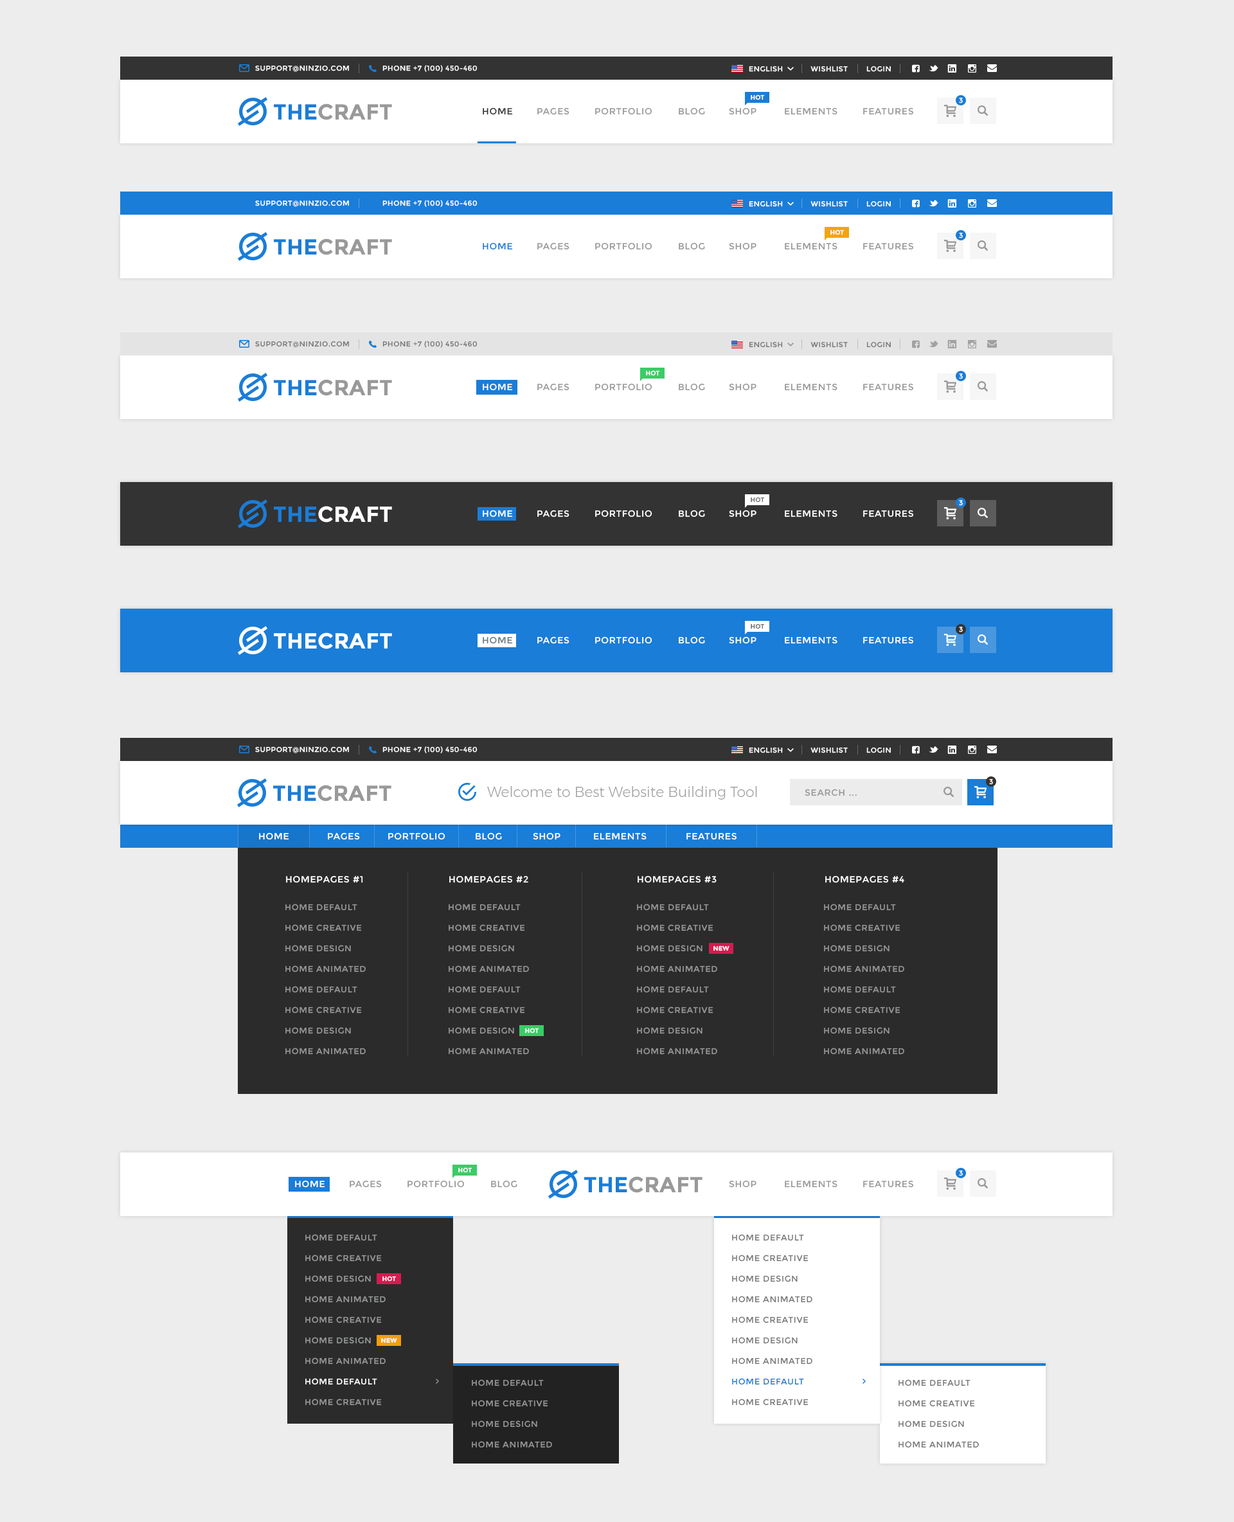
<style>
.page{position:relative;width:1234px;height:1522px;background:#ededed}
.page>*{position:absolute;margin:0}
.t1{font:7.1px "Montserrat-Regular";letter-spacing:0.05em;color:#ffffff;text-transform:uppercase}
.t2{font:6.4px "Montserrat-Bold";color:#ffffff;text-transform:uppercase}
.t3{font:21.9px "Montserrat-Bold";color:#999999;text-transform:uppercase}
.t4{font:21.9px "Montserrat-Bold";color:#1a7dd7;text-transform:uppercase}
.t5{font:9px "Montserrat-Regular";letter-spacing:0.05em;color:#333333;text-transform:uppercase}
.t6{font:9px "Montserrat-Regular";letter-spacing:0.05em;color:#999999;text-transform:uppercase}
.t7{font:9px "Montserrat-Regular";letter-spacing:0.05em;color:#1a7dd7;text-transform:uppercase}
.t8{font:7.1px "Montserrat-Regular";letter-spacing:0.05em;color:#777777;text-transform:uppercase}
.t9{font:9px "Montserrat-Regular";letter-spacing:0.05em;color:#ffffff;text-transform:uppercase}
.t10{font:6.4px "Montserrat-Bold";color:#777777;text-transform:uppercase}
.t11{font:21.9px "Montserrat-Bold";color:#ffffff;text-transform:uppercase}
.t12{font:9px "Montserrat-Regular";letter-spacing:0.05em;color:#777777;text-transform:uppercase}
.t13{font:14.1px "Montserrat-Light";color:#a4a4a4}
.t14{font:8.4px/20.6px "Montserrat-Regular";letter-spacing:0.05em;color:#979797;text-transform:uppercase}
.t15{font:8.4px/20.6px "Montserrat-Regular";letter-spacing:0.05em;color:#979899;text-transform:uppercase}
.t16{font:8.4px/20.6px "Montserrat-Regular";letter-spacing:0.05em;color:#ffffff;text-transform:uppercase}
.t17{font:8.4px/20.6px "Montserrat-Regular";letter-spacing:0.05em;color:#777777;text-transform:uppercase}
.t18{font:8.4px/20.6px "Montserrat-Regular";letter-spacing:0.05em;color:#1a7dd7;text-transform:uppercase}
.t19{font:8.4px/20.6px "Montserrat-Regular";letter-spacing:0.05em;color:#959595;text-transform:uppercase}
</style>
<div class="page">
<p class="t1" style="left:255px;top:66px;width:94px;height:6px">support@ninzio.com</p>
<p class="t1" style="left:382px;top:65px;width:96px;height:7px">phone +7 (100) 450-460</p>
<p class="t1" style="left:749px;top:66px;width:142px;height:6px">English            Wishlist        Login</p>
<p class="t2" style="left:751px;top:94px;width:14px;height:6px">Hot</p>
<p class="t1" style="left:959px;top:98px;width:4px;height:6px">3</p>
<p class="t3" style="left:274px;top:104px;width:118px;height:16px"><span class="t4">The</span>Craft</p>
<p class="t5" style="left:483px;top:107px;width:30px;height:8px">Home</p>
<p class="t6" style="left:537px;top:107px;width:33px;height:8px">Pages</p>
<p class="t6" style="left:595px;top:107px;width:57px;height:8px">Portfolio</p>
<p class="t6" style="left:679px;top:107px;width:26px;height:8px">Blog</p>
<p class="t6" style="left:729px;top:107px;width:28px;height:8px">Shop</p>
<p class="t6" style="left:785px;top:107px;width:53px;height:8px">Elements</p>
<p class="t6" style="left:863px;top:107px;width:51px;height:8px">Features</p>
<p class="t1" style="left:255px;top:201px;width:94px;height:6px">support@ninzio.com</p>
<p class="t1" style="left:382px;top:200px;width:96px;height:7px">phone +7 (100) 450-460</p>
<p class="t1" style="left:749px;top:201px;width:142px;height:6px">English            Wishlist        Login</p>
<p class="t2" style="left:831px;top:230px;width:14px;height:5px">Hot</p>
<p class="t1" style="left:959px;top:233px;width:4px;height:6px">3</p>
<p class="t3" style="left:274px;top:239px;width:118px;height:16px"><span class="t4">The</span>Craft</p>
<p class="t7" style="left:483px;top:242px;width:30px;height:8px">Home</p>
<p class="t6" style="left:537px;top:242px;width:33px;height:8px">Pages</p>
<p class="t6" style="left:595px;top:242px;width:57px;height:8px">Portfolio</p>
<p class="t6" style="left:679px;top:242px;width:26px;height:8px">Blog</p>
<p class="t6" style="left:729px;top:242px;width:28px;height:8px">Shop</p>
<p class="t6" style="left:785px;top:242px;width:53px;height:8px">Elements</p>
<p class="t6" style="left:863px;top:242px;width:51px;height:8px">Features</p>
<p class="t8" style="left:255px;top:341px;width:94px;height:7px">support@ninzio.com</p>
<p class="t8" style="left:382px;top:341px;width:96px;height:7px">phone +7 (100) 450-460</p>
<p class="t8" style="left:749px;top:342px;width:142px;height:6px">English            Wishlist        Login</p>
<p class="t2" style="left:646px;top:370px;width:14px;height:6px">Hot</p>
<p class="t1" style="left:959px;top:374px;width:4px;height:5px">3</p>
<p class="t3" style="left:274px;top:379px;width:118px;height:17px"><span class="t4">The</span>Craft</p>
<p class="t9" style="left:483px;top:383px;width:30px;height:8px">Home</p>
<p class="t6" style="left:537px;top:383px;width:33px;height:8px">Pages</p>
<p class="t6" style="left:595px;top:383px;width:57px;height:8px">Portfolio</p>
<p class="t6" style="left:679px;top:383px;width:26px;height:8px">Blog</p>
<p class="t6" style="left:729px;top:383px;width:28px;height:8px">Shop</p>
<p class="t6" style="left:785px;top:383px;width:53px;height:8px">Elements</p>
<p class="t6" style="left:863px;top:383px;width:51px;height:8px">Features</p>
<p class="t10" style="left:751px;top:497px;width:14px;height:6px">Hot</p>
<p class="t11" style="left:274px;top:506px;width:118px;height:17px"><span class="t4">The</span>Craft</p>
<p class="t9" style="left:483px;top:510px;width:30px;height:8px">Home</p>
<p class="t9" style="left:537px;top:510px;width:33px;height:8px">Pages</p>
<p class="t9" style="left:595px;top:510px;width:57px;height:8px">Portfolio</p>
<p class="t9" style="left:679px;top:510px;width:26px;height:8px">Blog</p>
<p class="t9" style="left:729px;top:510px;width:28px;height:8px">Shop</p>
<p class="t9" style="left:785px;top:510px;width:53px;height:8px">Elements</p>
<p class="t9" style="left:863px;top:510px;width:51px;height:8px">Features</p>
<p class="t1" style="left:959px;top:500px;width:4px;height:6px">3</p>
<p class="t10" style="left:751px;top:624px;width:14px;height:5px">Hot</p>
<p class="t1" style="left:959px;top:627px;width:4px;height:6px">3</p>
<p class="t11" style="left:274px;top:633px;width:118px;height:16px">TheCraft</p>
<p class="t12" style="left:483px;top:636px;width:30px;height:8px">Home</p>
<p class="t9" style="left:537px;top:636px;width:33px;height:8px">Pages</p>
<p class="t9" style="left:595px;top:636px;width:57px;height:8px">Portfolio</p>
<p class="t9" style="left:679px;top:636px;width:26px;height:8px">Blog</p>
<p class="t9" style="left:729px;top:636px;width:28px;height:8px">Shop</p>
<p class="t9" style="left:785px;top:636px;width:53px;height:8px">Elements</p>
<p class="t9" style="left:863px;top:636px;width:51px;height:8px">Features</p>
<p class="t1" style="left:255px;top:747px;width:94px;height:6px">support@ninzio.com</p>
<p class="t1" style="left:382px;top:746px;width:96px;height:7px">phone +7 (100) 450-460</p>
<p class="t1" style="left:749px;top:748px;width:142px;height:5px">English            Wishlist        Login</p>
<p class="t3" style="left:273px;top:785px;width:119px;height:17px"><span class="t4">The</span>Craft</p>
<p class="t1" style="left:989px;top:779px;width:4px;height:6px">3</p>
<p class="t13" style="left:487px;top:786px;width:270px;height:14px">Welcome to Best Website Building Tool</p>
<p class="t6" style="left:805px;top:789px;width:52px;height:8px">Search ...</p>
<p class="t9" style="left:259px;top:833px;width:30px;height:7px">Home</p>
<p class="t9" style="left:328px;top:833px;width:32px;height:7px">Pages</p>
<p class="t9" style="left:388px;top:833px;width:58px;height:7px">Portfolio</p>
<p class="t9" style="left:476px;top:833px;width:26px;height:7px">Blog</p>
<p class="t9" style="left:533px;top:833px;width:28px;height:7px">Shop</p>
<p class="t9" style="left:594px;top:833px;width:53px;height:7px">Elements</p>
<p class="t9" style="left:687px;top:833px;width:50px;height:7px">Features</p>
<p class="t9" style="left:286px;top:876px;width:77px;height:7px">Homepages #1</p>
<p class="t9" style="left:449px;top:876px;width:79px;height:7px">Homepages #2</p>
<p class="t9" style="left:638px;top:876px;width:79px;height:7px">Homepages #3</p>
<p class="t9" style="left:825px;top:876px;width:80px;height:7px">Homepages #4</p>
<p class="t14" style="left:285px;top:904px;width:81px;height:151px">Home Default<br>Home Creative<br>Home Design<br>Home Animated<br>Home Default<br>Home Creative<br>Home Design<br>Home Animated<br>Home Default<br>Home Creative<br>Home Design<br>Home Animated</p>
<p class="t14" style="left:449px;top:904px;width:80px;height:151px">Home Default<br>Home Creative<br>Home Design<br>Home Animated<br>Home Default<br>Home Creative<br>Home Design<br>Home Animated<br>Home Default<br>Home Creative<br>Home Design<br>Home Animated</p>
<p class="t14" style="left:637px;top:904px;width:80px;height:151px">Home Default<br>Home Creative<br>Home Design<br>Home Animated<br>Home Default<br>Home Creative<br>Home Design<br>Home Animated<br>Home Default<br>Home Creative<br>Home Design<br>Home Animated</p>
<p class="t14" style="left:824px;top:904px;width:81px;height:151px">Home Default<br>Home Creative<br>Home Design<br>Home Animated<br>Home Default<br>Home Creative<br>Home Design<br>Home Animated<br>Home Default<br>Home Creative<br>Home Design<br>Home Animated</p>
<p class="t2" style="left:714px;top:946px;width:16px;height:5px">New</p>
<p class="t2" style="left:525px;top:1028px;width:14px;height:6px">Hot</p>
<p class="t2" style="left:458px;top:1167px;width:15px;height:6px">Hot</p>
<p class="t9" style="left:295px;top:1180px;width:30px;height:8px">Home</p>
<p class="t6" style="left:350px;top:1180px;width:32px;height:8px">Pages</p>
<p class="t6" style="left:408px;top:1180px;width:57px;height:8px">Portfolio</p>
<p class="t6" style="left:491px;top:1180px;width:27px;height:8px">Blog</p>
<p class="t3" style="left:584px;top:1176px;width:119px;height:17px"><span class="t4">The</span>Craft</p>
<p class="t6" style="left:729px;top:1180px;width:28px;height:8px">Shop</p>
<p class="t6" style="left:785px;top:1180px;width:53px;height:8px">Elements</p>
<p class="t6" style="left:863px;top:1180px;width:51px;height:8px">Features</p>
<p class="t1" style="left:959px;top:1171px;width:4px;height:5px">3</p>
<p class="t15" style="left:305px;top:1234px;width:81px;height:172px">Home Default<br>Home Creative<br>Home Design<br>Home Animated<br>Home Creative<br>Home Design<br>Home Animated<br><span class="t16">Home Default<br></span>Home Creative<br>Home Design<br>Home Animated</p>
<p class="t17" style="left:732px;top:1234px;width:81px;height:172px">Home Default<br>Home Creative<br>Home Design<br>Home Animated<br>Home Creative<br>Home Design<br>Home Animated<br><span class="t18">Home Default<br></span>Home Creative<br>Home Design<br>Home Animated</p>
<p class="t2" style="left:382px;top:1276px;width:15px;height:6px">Hot</p>
<p class="t2" style="left:381px;top:1338px;width:16px;height:6px">New</p>
<p class="t19" style="left:472px;top:1380px;width:80px;height:68px">Home Default<br>Home Creative<br>Home Design<br>Home Animated</p>
<p class="t17" style="left:899px;top:1380px;width:80px;height:68px">Home Default<br>Home Creative<br>Home Design<br>Home Animated</p>
</div>
